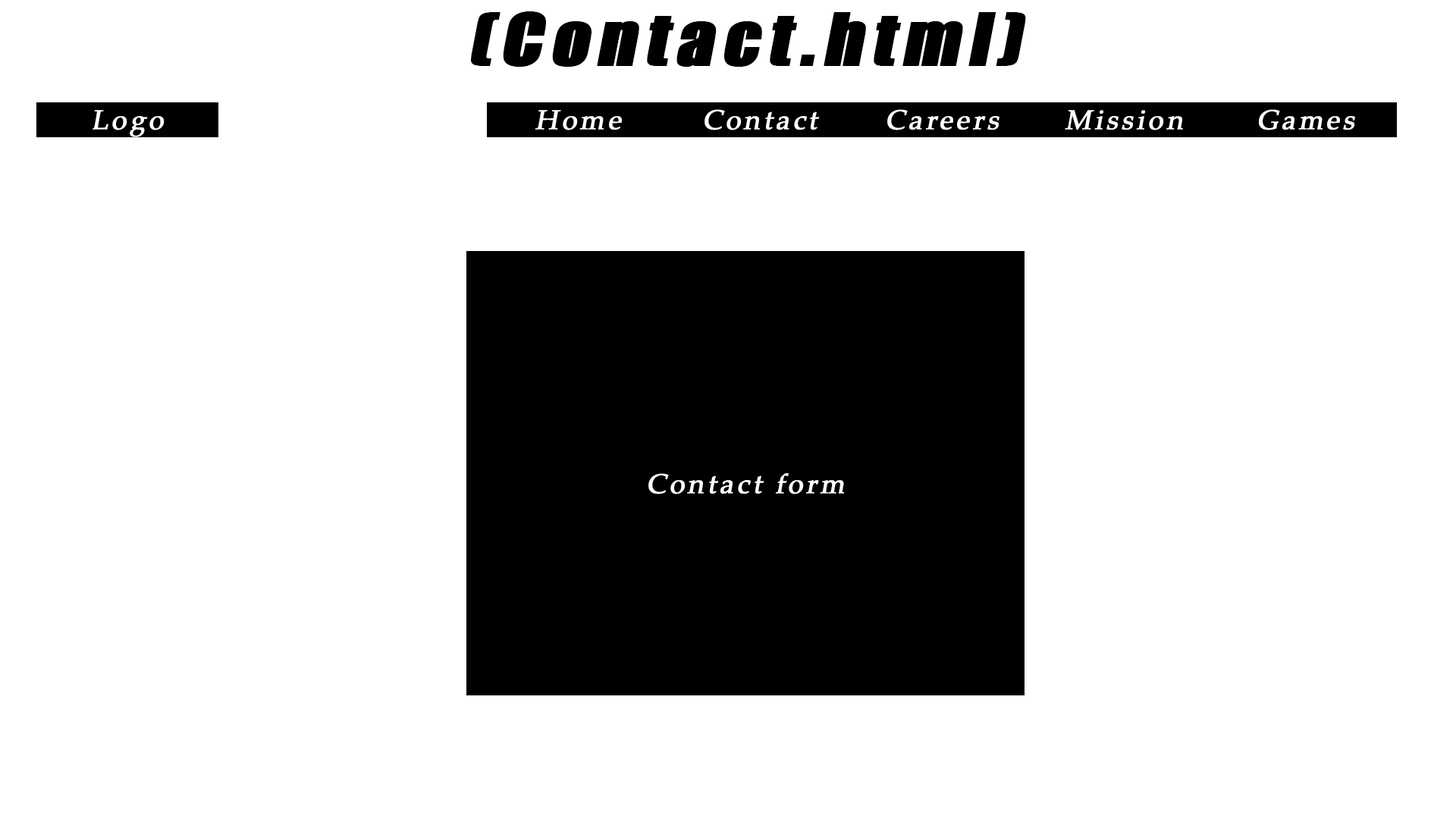
<style>
.page{position:relative;width:1456px;height:819px;background:#ffffff}
.page>*{position:absolute;margin:0}
.t1{font:66.7px "Impact";letter-spacing:0.1em;color:#000000;font-weight:bold;font-style:italic;scale:1.09 1}
.t2{font:27.3px "PalatinoLinotype-Roman";letter-spacing:0.1em;color:#ffffff;font-weight:bold;font-style:italic}
</style>
<div class="page">
<p class="t1" style="left:471px;top:11px;width:555px;height:56px">(Contact.html)</p>
<p class="t2" style="left:93px;top:110px;width:72px;height:27px">Logo</p>
<p class="t2" style="left:535px;top:110px;width:87px;height:20px">Home</p>
<p class="t2" style="left:704px;top:109px;width:116px;height:21px">Contact</p>
<p class="t2" style="left:887px;top:109px;width:112px;height:21px">Careers</p>
<p class="t2" style="left:1065px;top:110px;width:118px;height:20px">Mission</p>
<p class="t2" style="left:1259px;top:109px;width:96px;height:21px">Games</p>
<p class="t2" style="left:648px;top:473px;width:196px;height:21px">Contact form</p>
</div>
